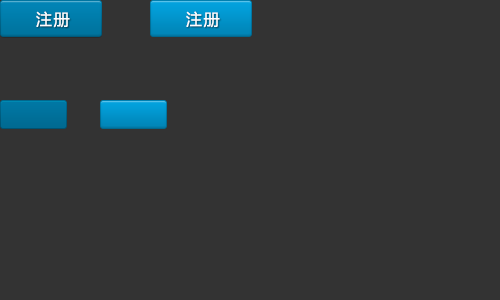
<style>
.page{position:relative;width:500px;height:300px;background:#333333}
.page>*{position:absolute;margin:0}
.t1{font:16px "MicrosoftYaHei";letter-spacing:0.1em;color:#fefeff}
</style>
<div class="page">
<p class="t1" style="left:36px;top:11px;width:34px;height:17px">注册</p>
<p class="t1" style="left:186px;top:11px;width:34px;height:17px">注册</p>
</div>
